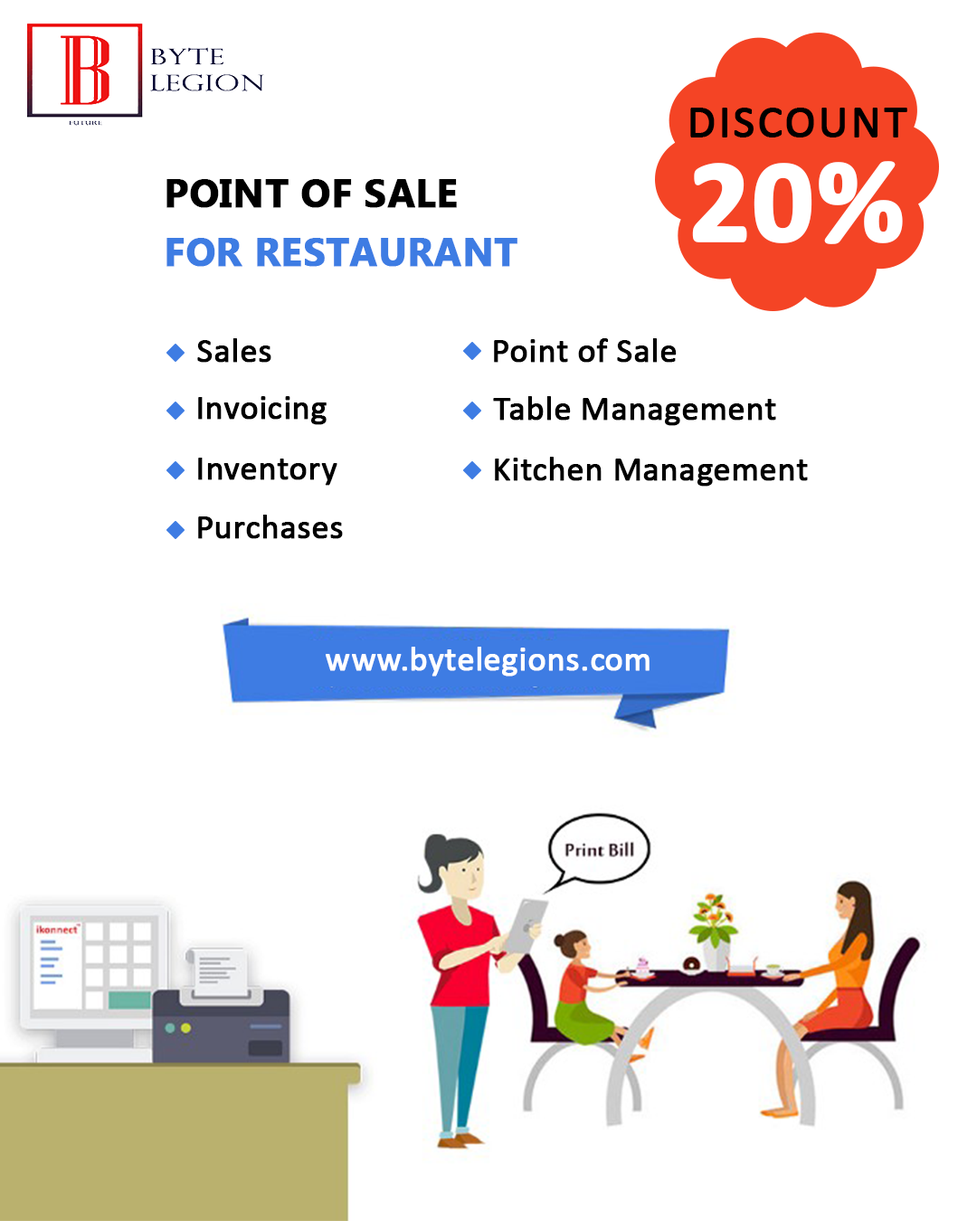
<style>
.page{position:relative;width:977px;height:1221px;background:#ffffff}
.page>*{position:absolute;margin:0}
.t1{font:46.1px "Calibri";color:#000000;text-transform:uppercase;font-weight:bold}
.t2{font:119.4px "Calibri-Bold";color:#ffffff;font-weight:bold}
.t3{font:39px/58.8px "MyanmarText-Bold";color:#3e7ce3;text-transform:uppercase;font-weight:bold}
.t4{font:39px/58.8px "MyanmarText-Bold";color:#000000;text-transform:uppercase;font-weight:bold}
.t5{font:34.4px "Calibri";color:#000000;font-weight:bold}
.t6{font:34.4px "Calibri";color:#ffffff;font-weight:bold}
</style>
<div class="page">
<p class="t1" style="left:690px;top:108px;width:217px;height:29px">discount</p>
<p class="t2" style="left:692px;top:161px;width:211px;height:83px">20%</p>
<p class="t3" style="left:166px;top:179px;width:351px;height:88px"><span class="t4">Point of Sale <br></span>for Restaurant</p>
<p class="t5" style="left:197px;top:338px;width:74px;height:25px">Sales</p>
<p class="t5" style="left:494px;top:338px;width:182px;height:25px">Point of Sale</p>
<p class="t5" style="left:198px;top:396px;width:128px;height:29px">Invoicing</p>
<p class="t5" style="left:493px;top:396px;width:283px;height:30px">Table Management</p>
<p class="t5" style="left:198px;top:458px;width:139px;height:28px">Inventory</p>
<p class="t5" style="left:495px;top:457px;width:313px;height:30px">Kitchen Management</p>
<p class="t5" style="left:198px;top:515px;width:145px;height:24px">Purchases</p>
<p class="t6" style="left:326px;top:647px;width:323px;height:29px">www.bytelegions.com</p>
</div>
